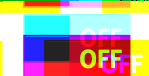
<style>
.page{position:relative;width:149px;height:76px}
.page>*{position:absolute;margin:0}
.t1{font:24.9px "Aller-Bold";letter-spacing:-0.01em}
</style>
<div class="page">
<p class="t1" style="left:80px;top:27px;width:42px;height:20px">OFF</p>
</div>
